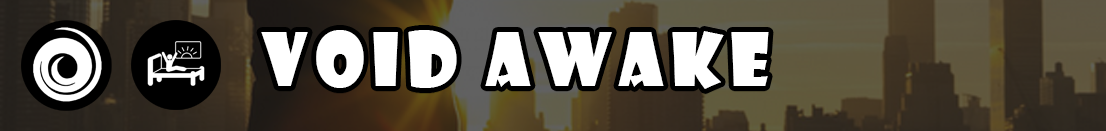
<style>
.page{position:relative;width:1106px;height:131px}
.page>*{position:absolute;margin:0}
.t1{font:72px "ShowcardGothic-Reg";letter-spacing:0.1em;color:#ffffff}
</style>
<div class="page">
<p class="t1" style="left:261px;top:30px;width:508px;height:59px">void awake</p>
</div>
